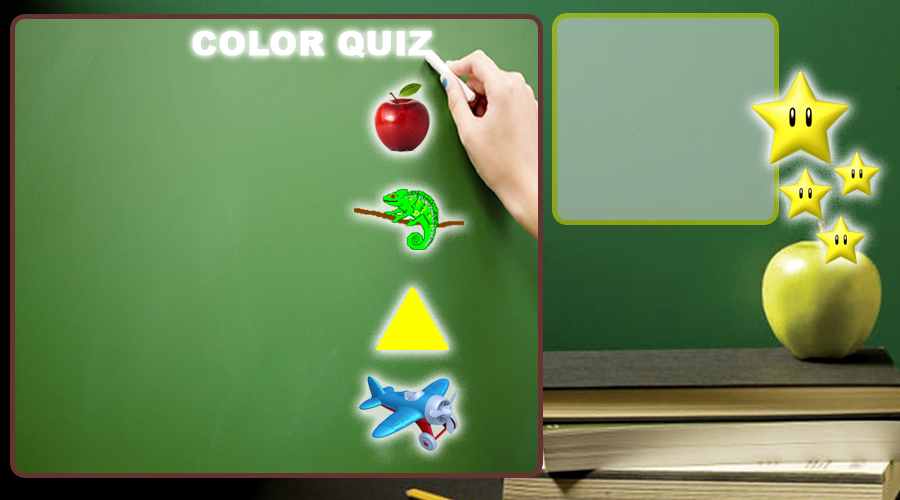
<style>
.page{position:relative;width:900px;height:500px}
.page>*{position:absolute;margin:0}
.t1{font:33.3px "Arial-Black";color:#ffffff;font-weight:bold}
</style>
<div class="page">
<p class="t1" style="left:192px;top:31px;width:240px;height:27px">COLOR QUIZ</p>
</div>
